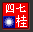
<style>
.page{position:relative;width:33px;height:32px;background:#f20000}
.page>*{position:absolute;margin:0}
.t1{font:10.4px "SimSun";color:#ffffff}
.t2{font:11.7px "SimSun";color:#ffffff}
</style>
<div class="page">
<p class="t1" style="left:6px;top:4px;width:20px;height:9px">四七</p>
<p class="t2" style="left:16px;top:15px;width:11px;height:12px">桂</p>
</div>
